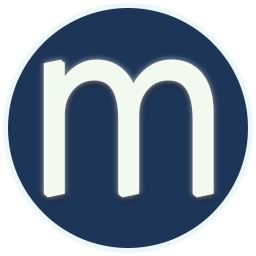
<style>
.page{position:relative;width:256px;height:256px;background:#1d3557}
.page>*{position:absolute;margin:0}
.t1{font:250px "KabelITCbyBT-Book";color:#f1faee;font-weight:bold}
</style>
<div class="page">
<p class="t1" style="left:43px;top:59px;width:171px;height:139px">m</p>
</div>
